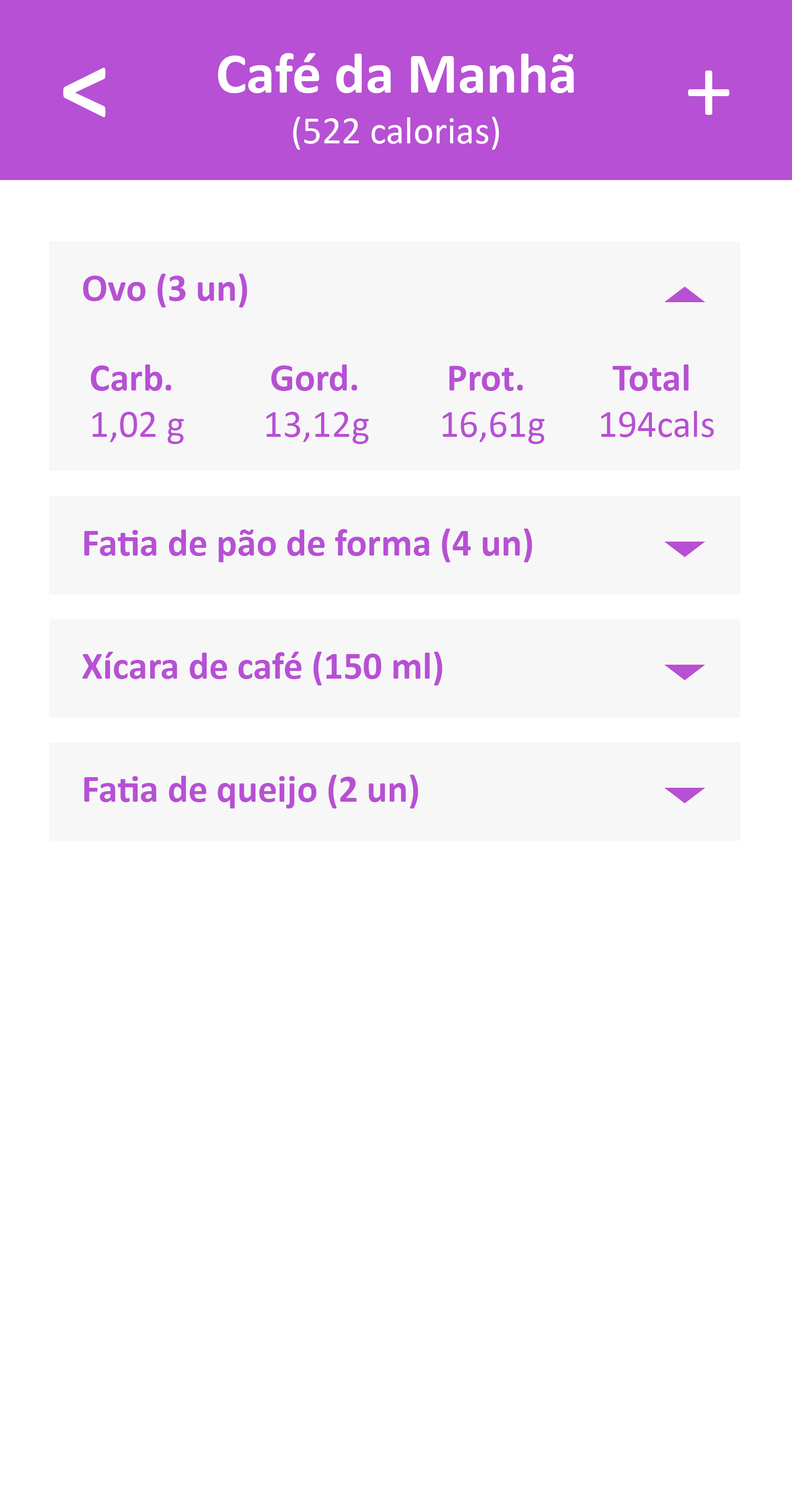
<style>
.page{position:relative;width:792px;height:1506px;background:#ffffff}
.page>*{position:absolute;margin:0}
.t1{font:57.9px "Calibri-Bold";color:#ffffff}
.t2{font:101.4px "Calibri-Bold";color:#ffffff}
.t3{font:96.5px "Calibri";color:#ffffff}
.t4{font:38.6px "Calibri";color:#ffffff}
.t5{font:38.6px "Calibri-Bold";color:#b750d4}
.t6{font:38.6px "Calibri";color:#b750d4}
</style>
<div class="page">
<p class="t1" style="left:218px;top:53px;width:356px;height:40px">Café da Manhã</p>
<p class="t2" style="left:63px;top:68px;width:43px;height:49px">&lt;</p>
<p class="t3" style="left:687px;top:70px;width:42px;height:45px">+</p>
<p class="t4" style="left:293px;top:117px;width:206px;height:33px">(522 calorias)</p>
<p class="t5" style="left:83px;top:274px;width:164px;height:34px">Ovo (3 un)</p>
<p class="t5" style="left:91px;top:364px;width:622px;height:80px">Carb.           Gord.          Prot.          Total<br><span class="t6">1,02 g         13,12g        16,61g      194cals</span></p>
<p class="t5" style="left:84px;top:529px;width:448px;height:33px">Fatia de pão de forma (4 un)</p>
<p class="t5" style="left:82px;top:652px;width:360px;height:33px">Xícara de café (150 ml)</p>
<p class="t5" style="left:84px;top:775px;width:334px;height:34px">Fatia de queijo (2 un)</p>
</div>
